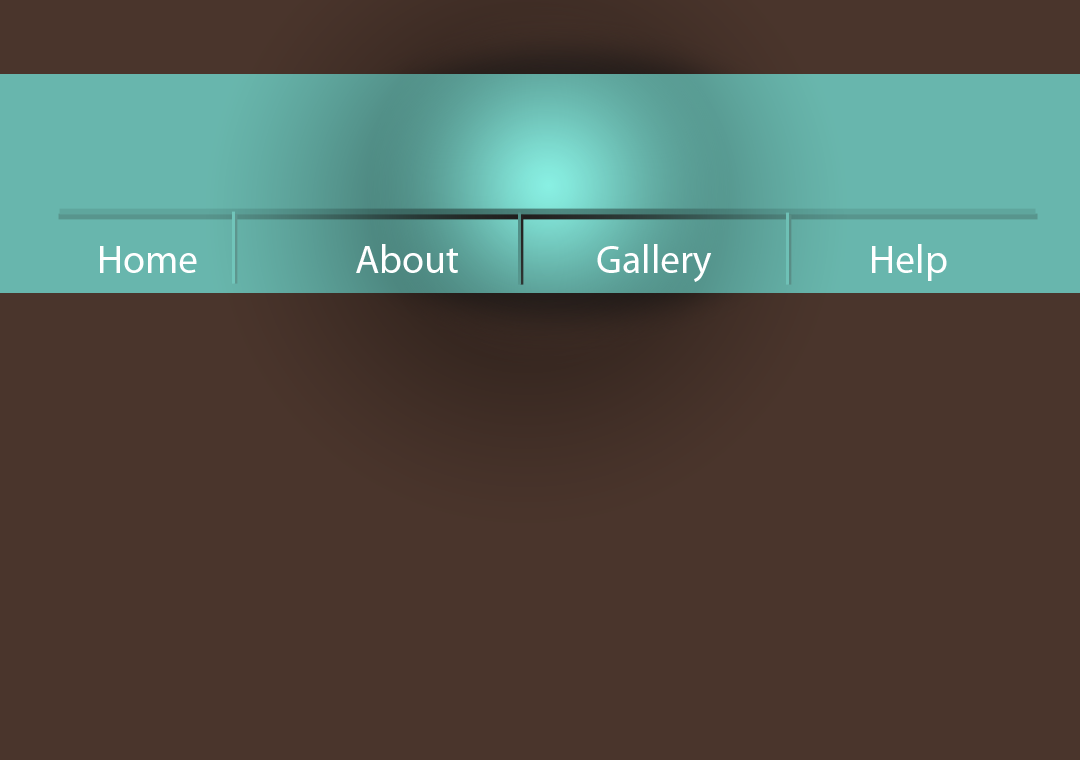
<style>
.page{position:relative;width:1080px;height:760px;background:#4a352c}
.page>*{position:absolute;margin:0}
.t1{font:40px "MyriadPro-Regular";color:#ffffff}
</style>
<div class="page">
<p class="t1" style="left:100px;top:246px;width:97px;height:27px">Home</p>
<p class="t1" style="left:356px;top:244px;width:102px;height:29px">About</p>
<p class="t1" style="left:597px;top:244px;width:115px;height:38px">Gallery</p>
<p class="t1" style="left:872px;top:244px;width:75px;height:37px">Help</p>
</div>
